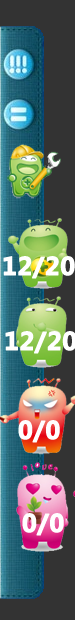
<style>
.page{position:relative;width:75px;height:620px;background:#333333}
.page>*{position:absolute;margin:0}
.t1{font:24px "MicrosoftYaHei-Bold";color:#ffffff;font-weight:bold}
</style>
<div class="page">
<p class="t1" style="left:3px;top:256px;width:72px;height:23px">12/20</p>
<p class="t1" style="left:5px;top:331px;width:72px;height:23px">12/20</p>
<p class="t1" style="left:18px;top:420px;width:42px;height:23px">0/0</p>
<p class="t1" style="left:22px;top:513px;width:42px;height:23px">0/0</p>
</div>
